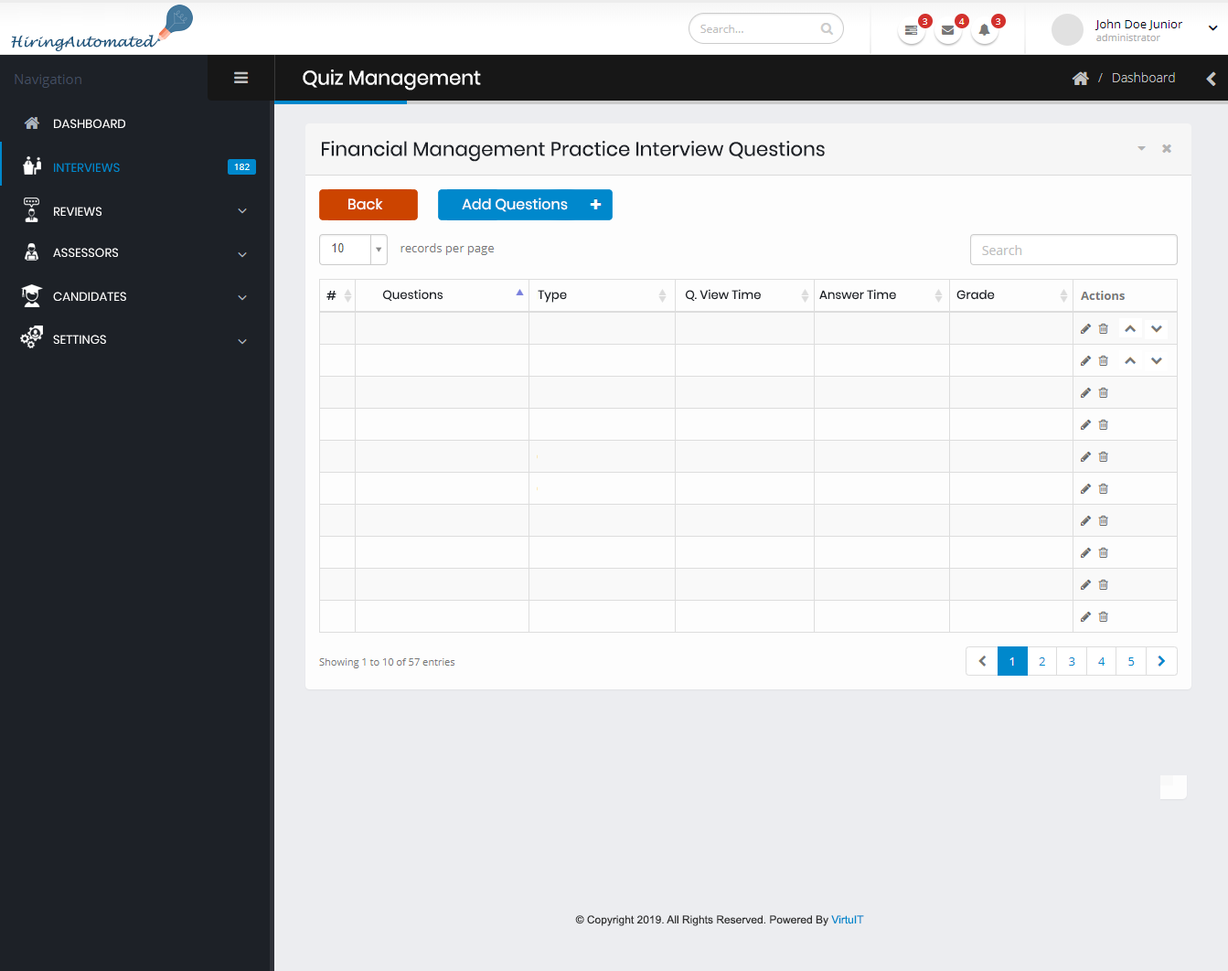
<style>
.page{position:relative;width:1228px;height:971px;background:#ecedf0}
.page>*{position:absolute;margin:0}
.t1{font:13.8px "LucidaHandwriting-Italic";color:#1f577f}
.t2{font:19.5px "Poppins-Regular";color:#ffffff}
.t3{font:12.2px "Poppins-Regular";color:#ffffff}
.t4{font:19.5px "Poppins-Regular";color:#1d2127}
.t5{font:12.2px "Poppins-Regular";color:#0088cc}
.t6{font:11px "Poppins-Regular";color:#fdfdfd}
.t7{font:12.2px "Poppins-Regular";color:#fdfdfd}
.t8{font:12.2px "Poppins-Regular";color:#1d2127}
.t9{font:11px "ArialMT";color:#333333}
.t10{font:11px "ArialMT";color:#0088cc}
</style>
<div class="page">
<p class="t1" style="left:11px;top:35px;width:146px;height:17px">HiringAutomated</p>
<p class="t2" style="left:303px;top:69px;width:178px;height:22px">Quiz Management</p>
<p class="t3" style="left:54px;top:119px;width:71px;height:9px">DASHBOARD</p>
<p class="t4" style="left:322px;top:141px;width:503px;height:21px">Financial Management Practice Interview Questions</p>
<p class="t5" style="left:54px;top:163px;width:66px;height:9px">INTERVIEWS</p>
<p class="t6" style="left:462px;top:198px;width:106px;height:14px">Add Questions</p>
<p class="t7" style="left:54px;top:207px;width:47px;height:9px">REVIEWS</p>
<p class="t6" style="left:348px;top:198px;width:35px;height:12px">Back</p>
<p class="t7" style="left:53px;top:248px;width:65px;height:9px">ASSESSORS</p>
<p class="t7" style="left:53px;top:292px;width:73px;height:9px">CANDIDATES</p>
<p class="t8" style="left:326px;top:291px;width:10px;height:9px">#</p>
<p class="t8" style="left:382px;top:289px;width:61px;height:12px">Questions</p>
<p class="t8" style="left:538px;top:290px;width:29px;height:13px">Type</p>
<p class="t8" style="left:685px;top:289px;width:76px;height:12px">Q. View Time</p>
<p class="t8" style="left:819px;top:289px;width:77px;height:11px">Answer Time</p>
<p class="t8" style="left:956px;top:290px;width:39px;height:10px">Grade</p>
<p class="t7" style="left:53px;top:335px;width:53px;height:9px">SETTINGS</p>
<p class="t9" style="left:575px;top:915px;width:289px;height:11px">© Copyright 2019. All Rights Reserved. Powered By <span class="t10">VirtuIT</span></p>
</div>
